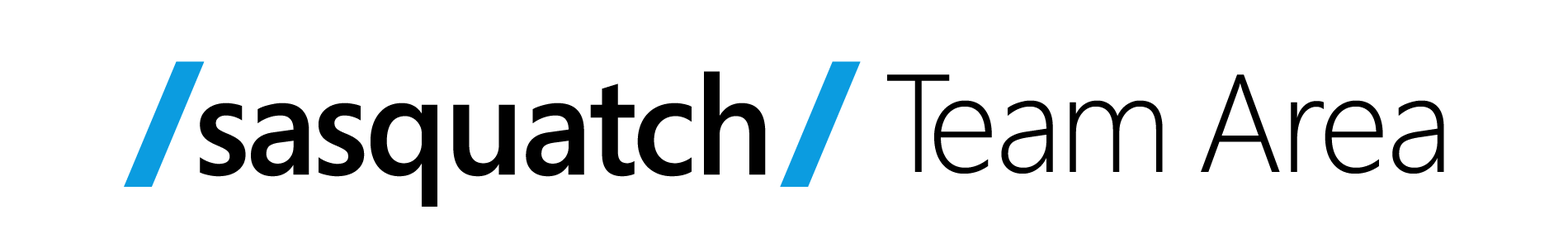
<style>
.page{position:relative;width:1568px;height:248px;background:#ffffff}
.page>*{position:absolute;margin:0}
.t1{font:152.8px "SegoeProBlack";letter-spacing:-0.025em;color:#0b9ce0}
.t2{font:138.9px "SegoePro-Semibold";letter-spacing:-0.025em;color:#000000}
.t3{font:138.9px "SegoePro-Light";letter-spacing:-0.025em;color:#000000}
</style>
<div class="page">
<p class="t1" style="left:124px;top:61px;width:81px;height:126px">/</p>
<p class="t1" style="left:780px;top:61px;width:81px;height:126px">/</p>
<p class="t2" style="left:200px;top:71px;width:566px;height:135px">sasquatch</p>
<p class="t3" style="left:887px;top:74px;width:557px;height:99px">Team Area</p>
</div>
